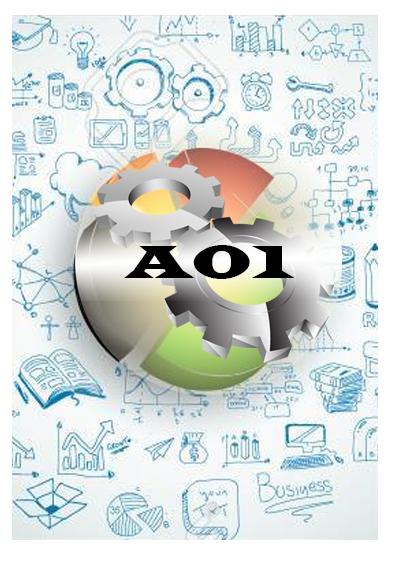
<style>
.page{position:relative;width:394px;height:561px}
.page>*{position:absolute;margin:0}
.t1{font:47.9px "LatinWide";color:#000000}
</style>
<div class="page">
<p class="t1" style="left:124px;top:245px;width:171px;height:34px">A01</p>
</div>
